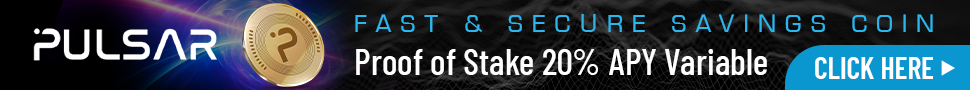
<style>
.page{position:relative;width:970px;height:90px}
.page>*{position:absolute;margin:0}
.t1{font:26px "MicroSquare";letter-spacing:0.375em;color:#2cb6ed;text-transform:uppercase}
.t2{font:36.4px "BarlowCondensed-Medium";color:#ffffff}
.t3{font:29.8px "BarlowCondensed-SemiBold";color:#ffffff;text-transform:uppercase}
</style>
<div class="page">
<p class="t1" style="left:355px;top:14px;width:578px;height:18px">Fast &amp; Secure Savings Coin</p>
<p class="t2" style="left:356px;top:49px;width:411px;height:26px">Proof of Stake 20% APY Variable</p>
<p class="t3" style="left:815px;top:57px;width:118px;height:22px">Click Here</p>
</div>
